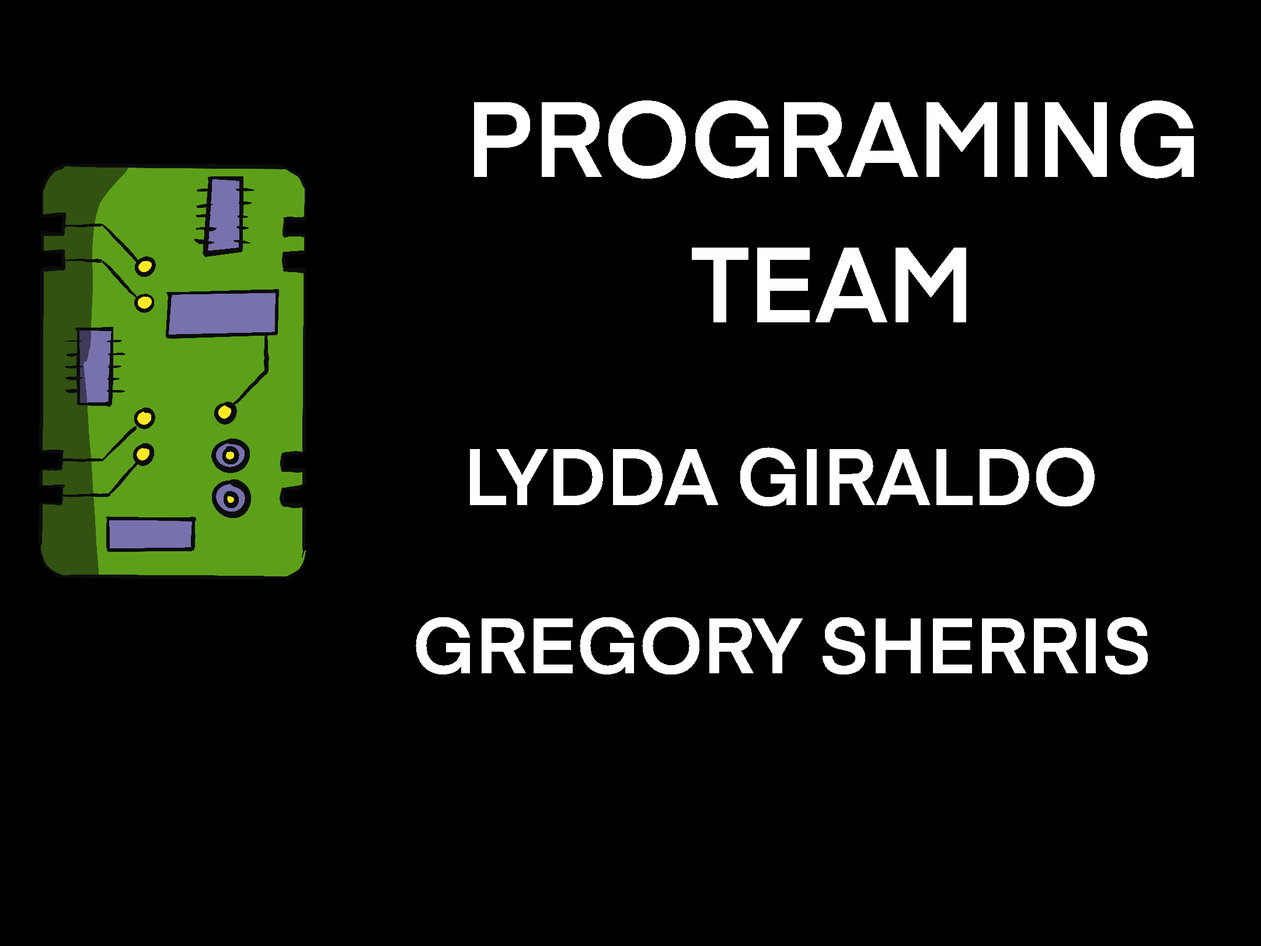
<style>
.page{position:relative;width:1261px;height:946px;background:#000000}
.page>*{position:absolute;margin:0}
.t1{font:105.1px "Eina01-SemiBold";color:#ffffff}
.t2{font:78.9px "Eina01-SemiBold";color:#ffffff}
.t3{font:77.2px "Eina01-SemiBold";color:#ffffff}
</style>
<div class="page">
<p class="t1" style="left:0px;top:0px;width:1261px;height:946px;text-align:center">PROGRAMING TEAM</p>
<p class="t2" style="left:0px;top:0px;width:1261px;height:946px;text-align:center">LYDDA GIRALDO</p>
<p class="t3" style="left:0px;top:0px;width:1261px;height:946px;text-align:center">GREGORY SHERRIS</p>
</div>
